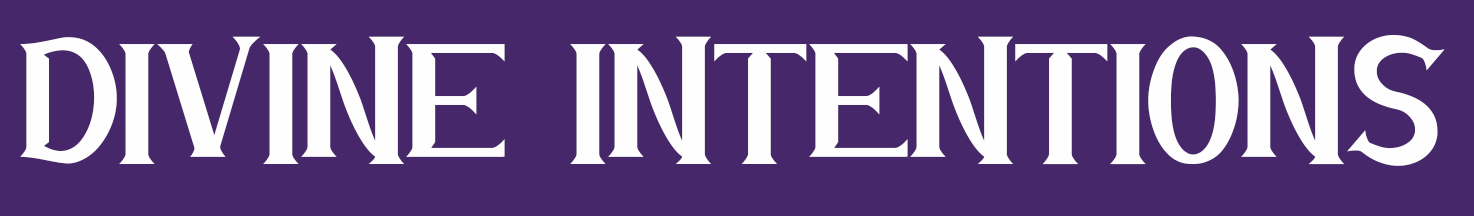
<style>
.page{position:relative;width:1474px;height:216px;background:#46286a}
.page>*{position:absolute;margin:0}
.t1{font:150px "DarkBookDemoRegular";color:#fffefe}
</style>
<div class="page">
<p class="t1" style="left:20px;top:35px;width:1425px;height:131px">DIVINE INTENTIONS</p>
</div>
